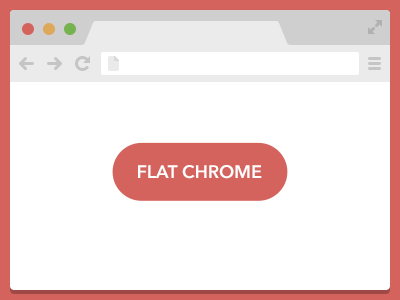
<style>
.page{position:relative;width:400px;height:300px;background:#ffffff}
.page>*{position:absolute;margin:0}
.t1{font:18px "AvenirNextLTPro-Demi";color:#ffffff;text-transform:uppercase}
</style>
<div class="page">
<p class="t1" style="left:138px;top:165px;width:124px;height:14px">Flat Chrome</p>
</div>
